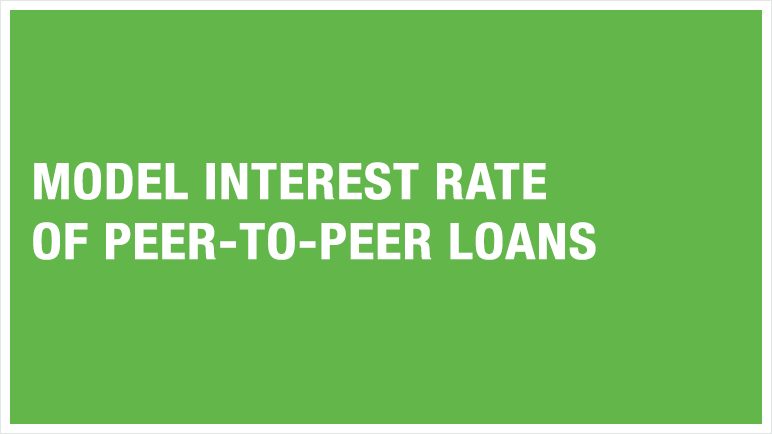
<style>
.page{position:relative;width:772px;height:434px;background:#63b64a}
.page>*{position:absolute;margin:0}
.t1{font:50px "HelveticaNeue-CondensedBold";color:#ffffff;font-weight:bold;scale:1.07 1}
</style>
<div class="page">
<p class="t1" style="left:33px;top:162px;width:563px;height:98px">MODEL INTEREST RATE<br>OF PEER-TO-PEER LOANS</p>
</div>
